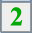
<style>
.page{position:relative;width:32px;height:33px}
.page>*{position:absolute;margin:0}
.t1{font:26.7px "TimesNewRomanPS-BoldMT";color:#05a70a}
</style>
<div class="page">
<p class="t1" style="left:10px;top:7px;width:13px;height:19px">2</p>
</div>
